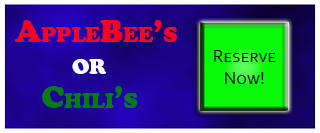
<style>
.page{position:relative;width:320px;height:133px}
.page>*{position:absolute;margin:0}
.t1{font:30px "CooperBlackStd";color:#fc021f;font-variant:small-caps}
.t2{font:18px "Corbel";color:#000000;font-variant:small-caps}
.t3{font:30px "CooperBlackStd";color:#fffefe;font-variant:small-caps}
.t4{font:30px "CooperBlackStd";color:#017c0d;font-variant:small-caps}
</style>
<div class="page">
<p class="t1" style="left:15px;top:19px;width:162px;height:23px">AppleBee’s</p>
<p class="t2" style="left:214px;top:50px;width:62px;height:34px">Reserve<br>   Now!</p>
<p class="t3" style="left:72px;top:59px;width:35px;height:15px">or</p>
<p class="t4" style="left:42px;top:86px;width:96px;height:22px">Chili’s</p>
</div>
